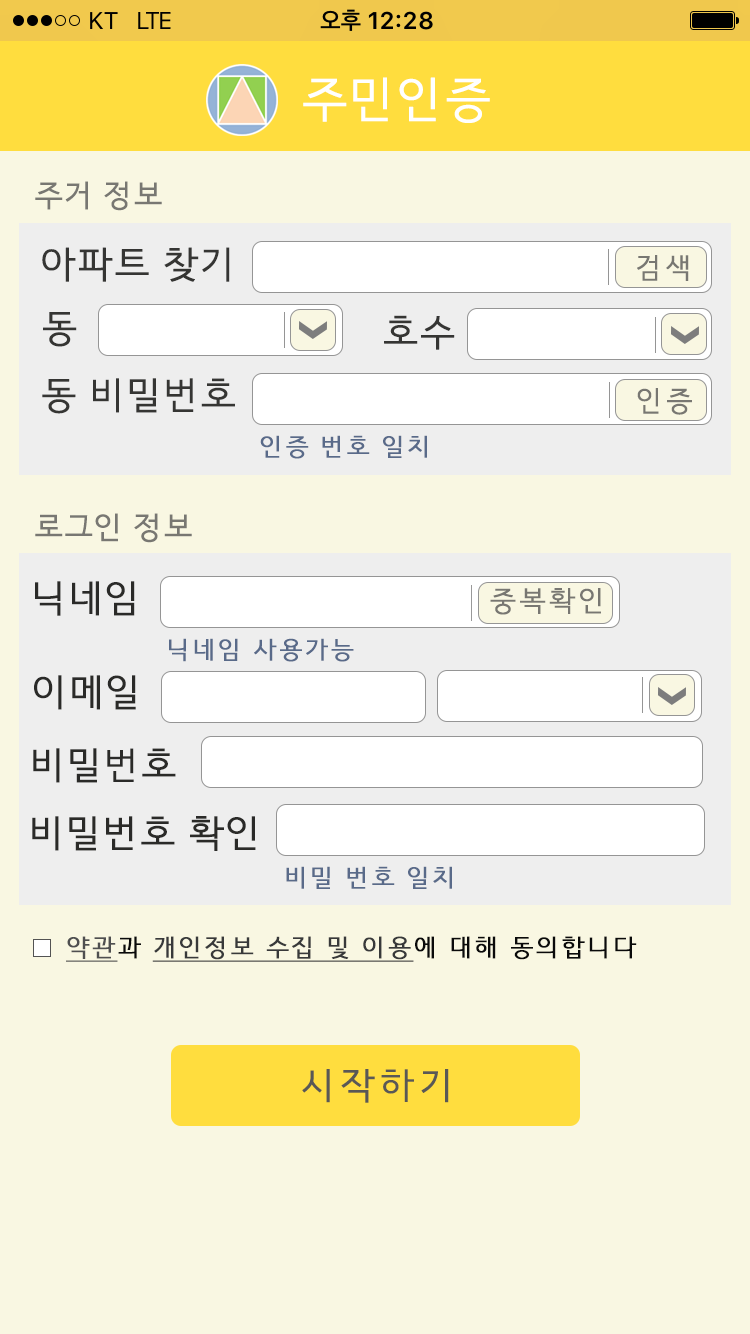
<style>
.page{position:relative;width:750px;height:1334px;background:#f9f7e2}
.page>*{position:absolute;margin:0}
.t1{font:48px "HCRDotum";color:#ffffff;text-transform:uppercase;font-weight:bold}
.t2{font:48px "HCRDotum";color:#ffdd3e;text-transform:uppercase;font-weight:bold}
.t3{font:30px "HCRDotum";color:#787772;text-transform:uppercase;font-weight:bold}
.t4{font:36.9px "HCRDotum";color:#353533;text-transform:uppercase;font-weight:bold}
.t5{font:27.7px "HCRDotum";letter-spacing:0.075em;color:#787772;text-transform:uppercase;font-weight:bold}
.t6{font:24px "HCRDotum";letter-spacing:0.075em;color:#596a89;text-transform:uppercase;font-weight:bold}
.t7{font:37px "HCRDotum";color:#2a2a28;text-transform:uppercase;font-weight:bold}
.t8{font:24px "HCRDotum";letter-spacing:0.075em;color:#38393a;text-transform:uppercase;font-weight:bold;text-decoration:underline}
.t9{font:24px "HCRDotum";letter-spacing:0.075em;color:#4f4f50;text-transform:uppercase;font-weight:bold;text-decoration:underline}
.t10{font:24px "HCRDotum";letter-spacing:0.075em;color:#0a0a0a;text-transform:uppercase;font-weight:bold}
.t11{font:36px "HCRDotum";letter-spacing:0.1em;color:#595856;text-transform:uppercase;font-weight:bold}
</style>
<div class="page">
<p class="t1" style="left:303px;top:77px;width:220px;height:46px">주민인증<span class="t2">d</span></p>
<p class="t3" style="left:35px;top:181px;width:127px;height:30px">주거 정보</p>
<p class="t4" style="left:42px;top:247px;width:188px;height:35px">아파트 찾기</p>
<p class="t5" style="left:637px;top:255px;width:52px;height:26px">검색</p>
<p class="t4" style="left:43px;top:312px;width:34px;height:35px">동</p>
<p class="t4" style="left:384px;top:315px;width:71px;height:35px">호수</p>
<p class="t4" style="left:42px;top:378px;width:193px;height:36px">동 비밀번호</p>
<p class="t5" style="left:637px;top:388px;width:55px;height:27px">인증</p>
<p class="t6" style="left:260px;top:435px;width:167px;height:24px">인증 번호 일치</p>
<p class="t3" style="left:35px;top:513px;width:157px;height:30px">로그인 정보</p>
<p class="t7" style="left:35px;top:581px;width:100px;height:35px">닉네임</p>
<p class="t5" style="left:490px;top:588px;width:111px;height:27px">중복확인</p>
<p class="t6" style="left:169px;top:638px;width:185px;height:24px">닉네임 사용가능</p>
<p class="t7" style="left:34px;top:675px;width:102px;height:35px">이메일</p>
<p class="t7" style="left:33px;top:748px;width:143px;height:35px">비밀번호</p>
<p class="t7" style="left:32px;top:816px;width:224px;height:35px">비밀번호 확인</p>
<p class="t6" style="left:286px;top:866px;width:166px;height:23px">비밀 번호 일치</p>
<p class="t8" style="left:66px;top:936px;width:571px;height:26px"><span class="t9">약관</span><span class="t10">과 </span>개인정보 수집 및 이용<span class="t10">에 대해 동의합니다</span></p>
<p class="t11" style="left:302px;top:1069px;width:147px;height:34px">시작하기</p>
</div>
